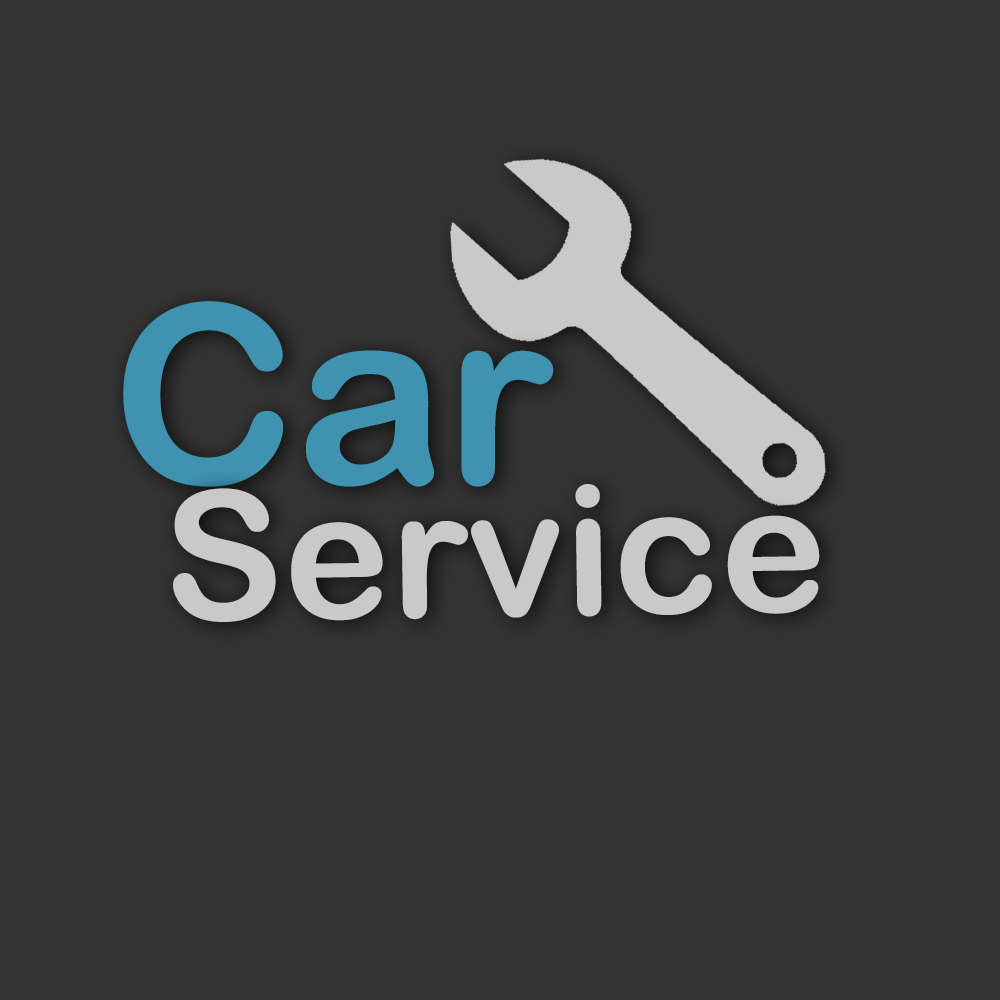
<style>
.page{position:relative;width:1000px;height:1000px;background:#333333}
.page>*{position:absolute;margin:0}
.t1{font:250px "ArialRoundedMTBold";color:#3f92b0}
.t2{font:180px "ArialRoundedMTBold";color:#c9c9c9}
</style>
<div class="page">
<p class="t1" style="left:123px;top:301px;width:431px;height:186px">Car</p>
<p class="t2" style="left:173px;top:484px;width:647px;height:138px;rotate:-1deg">Service</p>
</div>
